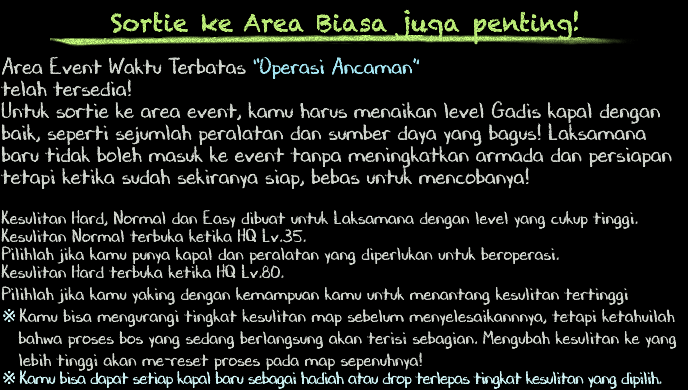
<style>
.page{position:relative;width:688px;height:390px;background:#000000}
.page>*{position:absolute;margin:0}
.t1{font:24px "Chalkduster";color:#b7e674}
.t2{font:22px/22px "DJBChalkItUp";color:#d9ded6}
.t3{font:22px/22px "DJBChalkItUp";color:#adf2ff}
.t4{font:18px/20px "DJBChalkItUp";color:#d9ded6}
.t5{font:18px/24px "DJBChalkItUp";color:#d9ded6}
.t6{font:18px/20px "TimesNewRomanPSMT";letter-spacing:-0.04em;color:#d7feff}
.t7{font:18px/20px "DJBChalkItUp";letter-spacing:-0.04em;color:#d7feff}
</style>
<div class="page">
<p class="t1" style="left:110px;top:9px;width:468px;height:36px">Sortie ke Area Biasa juga penting!</p>
<p class="t2" style="left:0px;top:56px;width:677px;height:333px">Area Event Waktu Terbatas <span class="t3">“Operasi Ancaman”<br></span>telah tersedia!<br>Untuk sortie ke area event, kamu harus menaikan level Gadis kapal dengan<br>baik, seperti sejumlah peralatan dan sumber daya yang bagus! Laksamana <br>baru tidak boleh masuk ke event tanpa meningkatkan armada dan persiapan<br>tetapi ketika sudah sekiranya siap, bebas untuk mencobanya!<br><br><span class="t4">Kesulitan Hard, Normal dan Easy dibuat untuk Laksamana dengan level yang cukup tinggi.<br>Kesulitan Normal terbuka ketika HQ Lv.35.<br>Pilihlah jika kamu punya kapal dan peralatan yang diperlukan untuk beroperasi.<br>Kesulitan Hard terbuka ketika HQ Lv.80.<br></span><span class="t5">Pilihlah jika kamu yaking dengan kemampuan kamu untuk menantang kesulitan tertinggi</span><span class="t6"><br>※ </span><span class="t5">Kamu bisa mengurangi tingkat kesulitan map sebelum menyelesaikannnya, tetapi ketahuilah<br>   bahwa proses bos yang sedang berlangsung akan terisi sebagian. Mengubah kesulitan ke yang<br>   lebih tinggi akan me-reset proses pada map sepenuhnya!<br></span><span class="t6">※ </span><span class="t7">Kamu bisa dapat setiap kapal baru sebagai hadiah atau drop terlepas tingkat kesulitan yang dipilih.</span></p>
</div>
